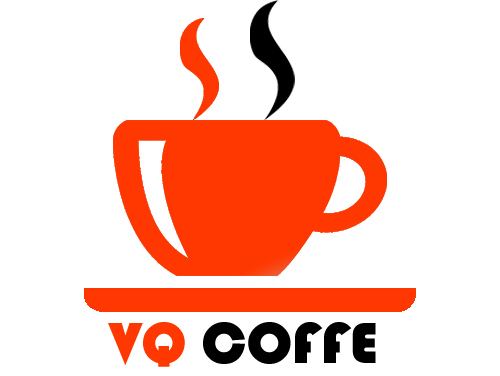
<style>
.page{position:relative;width:500px;height:376px;background:#ffffff}
.page>*{position:absolute;margin:0}
.t1{font:60px "Bauhaus93";color:#000000}
.t2{font:60px "Bauhaus93";color:#ff3700}
</style>
<div class="page">
<p class="t1" style="left:108px;top:322px;width:268px;height:45px"><span class="t2">VQ</span> COFFE</p>
</div>
